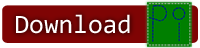
<style>
.page{position:relative;width:200px;height:48px;background:#ffffff}
.page>*{position:absolute;margin:0}
.t1{font:26.6px "Consolas";color:#ffffff}
</style>
<div class="page">
<p class="t1" style="left:16px;top:14px;width:114px;height:20px">Download</p>
</div>
